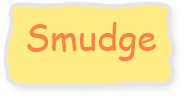
<style>
.page{position:relative;width:184px;height:98px;background:#ffec84}
.page>*{position:absolute;margin:0}
.t1{font:36px "ComicSansMS";color:#ff8047}
</style>
<div class="page">
<p class="t1" style="left:27px;top:22px;width:129px;height:39px">Smudge</p>
</div>
